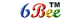
<style>
.page{position:relative;width:62px;height:20px;background:#ffffff}
.page>*{position:absolute;margin:0}
.t1{font:20px "ScriptMTBold"}
.t2{font:7px "Arial-Black";color:#0e1e0f}
</style>
<div class="page">
<p class="t1" style="left:20px;top:3px;width:41px;height:15px">6Bee</p>
<p class="t2" style="left:49px;top:2px;width:11px;height:6px">TM</p>
</div>
